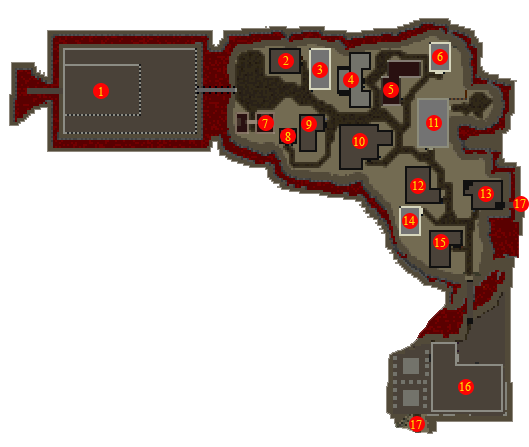
<style>
.page{position:relative;width:529px;height:447px;background:#ffffff}
.page>*{position:absolute;margin:0}
.t1{font:12px "TimesNewRomanPSMT";color:#fcd604}
</style>
<div class="page">
<p class="t1" style="left:437px;top:52px;width:6px;height:9px">6</p>
<p class="t1" style="left:283px;top:56px;width:6px;height:9px">2</p>
<p class="t1" style="left:317px;top:65px;width:6px;height:9px">3</p>
<p class="t1" style="left:348px;top:75px;width:6px;height:9px">4</p>
<p class="t1" style="left:99px;top:87px;width:4px;height:9px">1</p>
<p class="t1" style="left:388px;top:85px;width:6px;height:9px">5</p>
<p class="t1" style="left:262px;top:119px;width:6px;height:9px">7</p>
<p class="t1" style="left:306px;top:120px;width:6px;height:9px">9</p>
<p class="t1" style="left:429px;top:118px;width:10px;height:9px">11</p>
<p class="t1" style="left:285px;top:132px;width:6px;height:9px">8</p>
<p class="t1" style="left:354px;top:137px;width:11px;height:9px">10</p>
<p class="t1" style="left:413px;top:181px;width:11px;height:9px">12</p>
<p class="t1" style="left:481px;top:189px;width:11px;height:9px">13</p>
<p class="t1" style="left:515px;top:199px;width:11px;height:9px">17</p>
<p class="t1" style="left:404px;top:216px;width:11px;height:9px">14</p>
<p class="t1" style="left:435px;top:238px;width:11px;height:9px">15</p>
<p class="t1" style="left:460px;top:382px;width:11px;height:9px">16</p>
<p class="t1" style="left:411px;top:420px;width:11px;height:9px">17</p>
</div>
